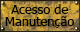
<style>
.page{position:relative;width:80px;height:32px}
.page>*{position:absolute;margin:0}
.t1{font:11.7px/12.2px "Tahoma";color:#000000;scale:1.11 1}
.t2{font:11.7px/15.2px "Tahoma";color:#000000;scale:1.11 1}
</style>
<div class="page">
<p class="t1" style="left:5px;top:4px;width:70px;height:24px;text-align:center"><span class="t2">Acesso de<br></span>Manutenção</p>
</div>
